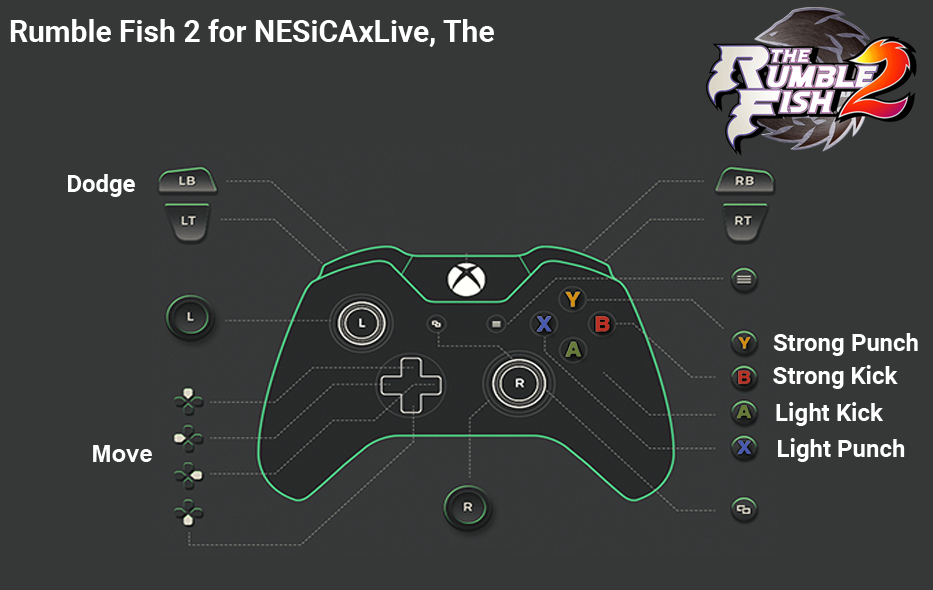
<style>
.page{position:relative;width:933px;height:590px;background:#363838}
.page>*{position:absolute;margin:0}
.t1{font:30px "Roboto-Bold";color:#ffffff}
.t2{font:24px "Roboto-Bold";color:#ffffff}
.t3{font:24px "Arial-BoldMT";color:#fefefe}
</style>
<div class="page">
<p class="t1" style="left:10px;top:19px;width:484px;height:28px">Rumble Fish 2 for NESiCAxLive, The</p>
<p class="t2" style="left:68px;top:174px;width:67px;height:23px">Dodge</p>
<p class="t2" style="left:773px;top:333px;width:145px;height:23px">Strong Punch</p>
<p class="t2" style="left:773px;top:365px;width:125px;height:24px">Strong Kick</p>
<p class="t2" style="left:776px;top:402px;width:108px;height:24px">Light Kick</p>
<p class="t2" style="left:778px;top:438px;width:127px;height:24px">Light Punch</p>
<p class="t3" style="left:93px;top:445px;width:59px;height:17px">Move</p>
</div>
